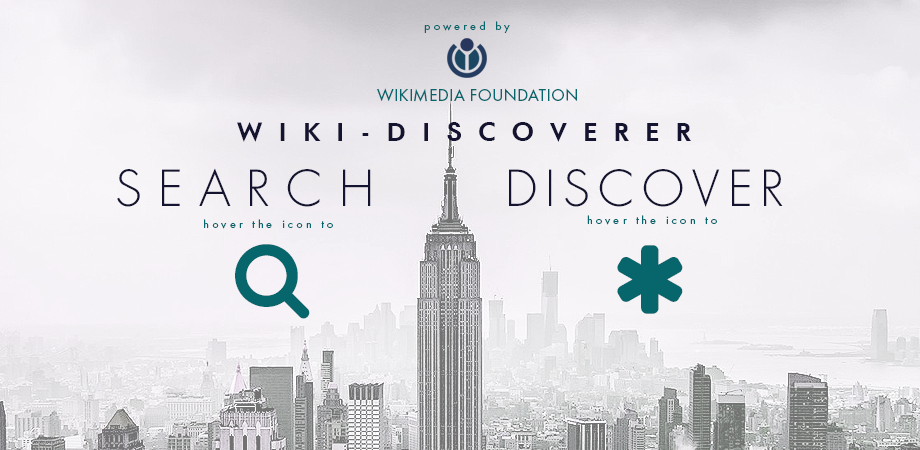
<style>
.page{position:relative;width:920px;height:450px}
.page>*{position:absolute;margin:0}
.t1{font:12px "FuturaTOT-Book";letter-spacing:0.26em;color:#07666c}
.t2{font:17.1px "FuturaTOT-Book";letter-spacing:0.02em;color:#07666c;text-transform:uppercase}
.t3{font:25px "AFuturaOrtoBold";letter-spacing:0.64em;color:#141431;text-transform:uppercase}
.t4{font:48.4px "Futura-Light";letter-spacing:0.32em;color:#141431;text-transform:uppercase}
.t5{font:48.4px "Futura-Light";letter-spacing:0.16em;color:#141431;text-transform:uppercase}
</style>
<div class="page">
<p class="t1" style="left:424px;top:21px;width:86px;height:12px">powered by</p>
<p class="t2" style="left:377px;top:88px;width:200px;height:14px">Wikimedia Foundation</p>
<p class="t3" style="left:237px;top:122px;width:454px;height:20px">wiki-discoverer</p>
<p class="t4" style="left:117px;top:168px;width:254px;height:39px">Search</p>
<p class="t5" style="left:509px;top:169px;width:274px;height:39px">Discover</p>
<p class="t1" style="left:204px;top:219px;width:129px;height:10px">hover the icon to</p>
<p class="t1" style="left:587px;top:215px;width:130px;height:10px">hover the icon to</p>
</div>
